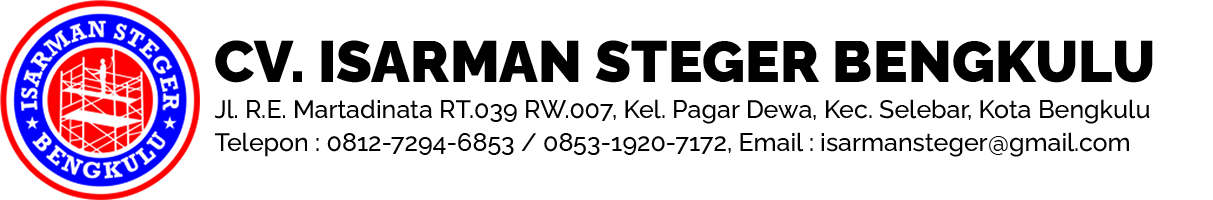
<style>
.page{position:relative;width:1213px;height:200px;background:#ffffff}
.page>*{position:absolute;margin:0}
.t1{font:58.3px "Raleway-Black";color:#000000}
.t2{font:25px "Raleway-Medium";color:#000000}
</style>
<div class="page">
<p class="t1" style="left:215px;top:40px;width:938px;height:43px">CV. ISARMAN STEGER BENGKULU</p>
<p class="t2" style="left:214px;top:99px;width:936px;height:25px">Jl. R.E. Martadinata RT.039 RW.007, Kel. Pagar Dewa, Kec. Selebar, Kota Bengkulu</p>
<p class="t2" style="left:215px;top:132px;width:914px;height:25px">Telepon : 0812-7294-6853 / 0853-1920-7172, Email : isarmansteger@gmail.com</p>
</div>
